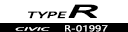
<style>
.page{position:relative;width:128px;height:32px;background:#ffffff}
.page>*{position:absolute;margin:0}
.t1{font:16.7px "MicrosoftYaHei";color:#000000;font-weight:bold;font-style:italic;scale:3 1}
.t2{font:8.3px "MicrosoftYaHeiUI";color:#000000;font-weight:bold;font-style:italic;scale:2 1}
.t3{font:4.2px "MicrosoftYaHeiUI";color:#ffffff;font-weight:bold;font-style:italic;scale:3 1}
.t4{font:7.8px "MicrosoftYaHeiUI";color:#ffffff;font-weight:bold;scale:1.33 1}
</style>
<div class="page">
<p class="t1" style="left:68px;top:4px;width:30px;height:14px">R</p>
<p class="t2" style="left:28px;top:11px;width:39px;height:8px">TYPE</p>
<p class="t3" style="left:15px;top:27px;width:35px;height:4px">CIVIC</p>
<p class="t4" style="left:65px;top:25px;width:43px;height:7px">R-01997</p>
</div>
